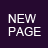
<style>
.page{position:relative;width:48px;height:48px;background:#260930}
.page>*{position:absolute;margin:0}
.t1{font:12px "ArialMT";color:#ffffff}
</style>
<div class="page">
<p class="t1" style="left:8px;top:14px;width:28px;height:9px">NEW</p>
<p class="t1" style="left:8px;top:27px;width:33px;height:9px">PAGE</p>
</div>
